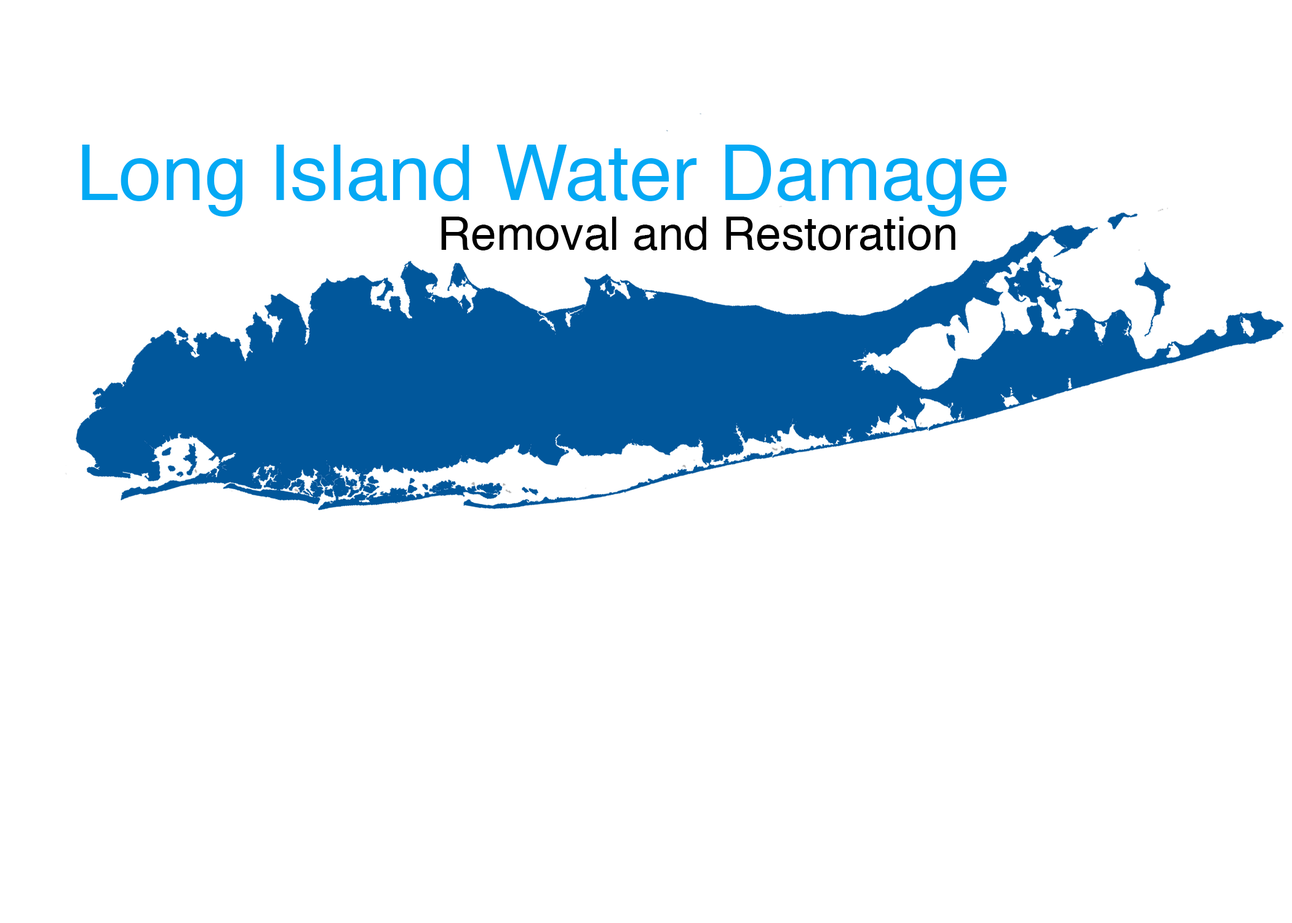
<style>
.page{position:relative;width:1292px;height:923px;background:#ffffff}
.page>*{position:absolute;margin:0}
.t1{font:76.9px "Helvetica";color:#03a9f4}
.t2{font:46.1px "Helvetica";color:#000000}
</style>
<div class="page">
<p class="t1" style="left:82px;top:145px;width:925px;height:72px">Long Island Water Damage</p>
<p class="t2" style="left:441px;top:217px;width:515px;height:33px">Removal and Restoration</p>
</div>
